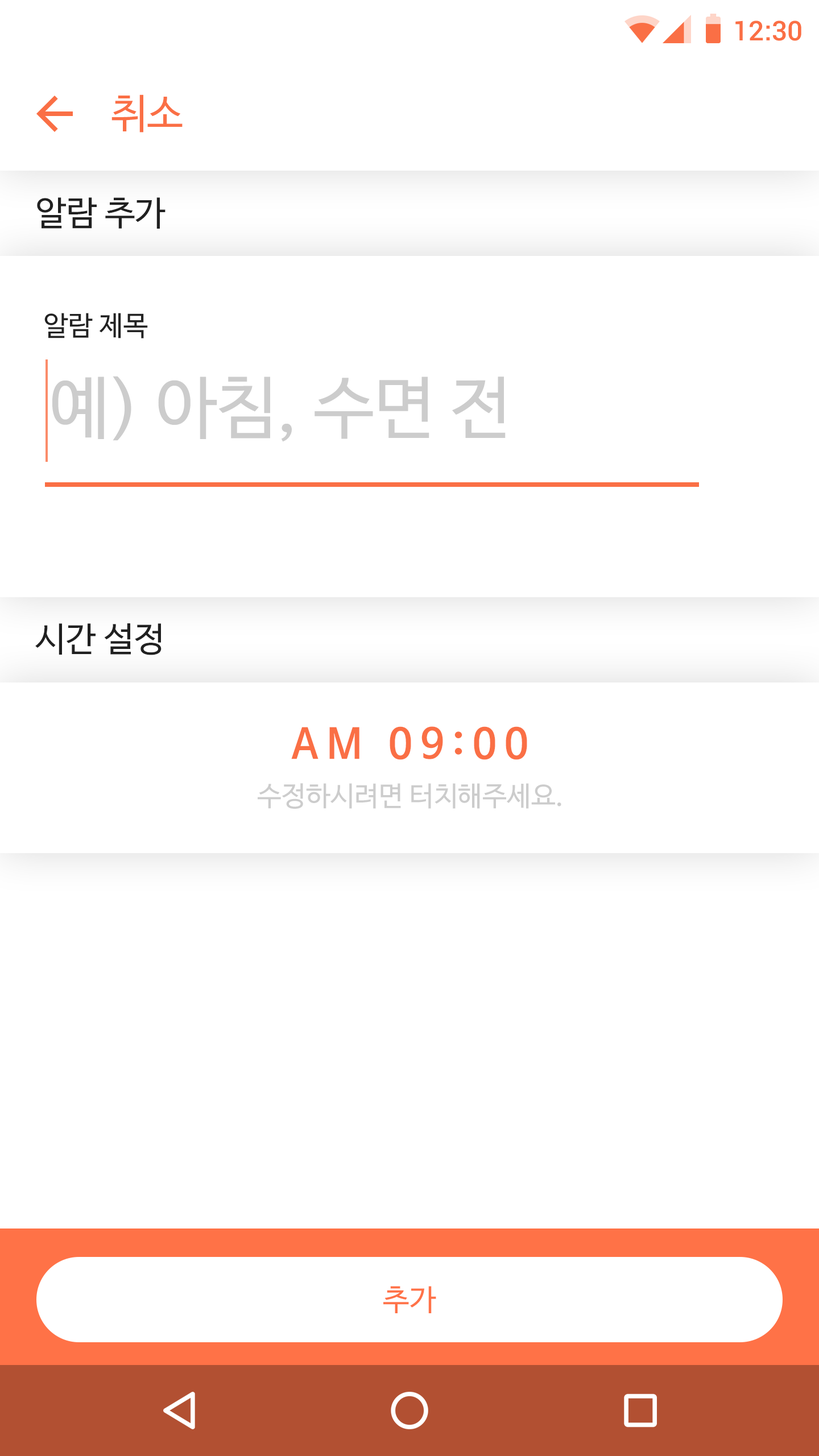
<style>
.page{position:relative;width:819px;height:1456px;background:#ffffff}
.page>*{position:absolute;margin:0}
.t1{font:27.3px "Roboto-Medium";color:#fa6f45}
.t2{font:40.9px "NanumBarunGothic";color:#fa6f45}
.t3{font:34.1px "NanumBarunGothic";color:#202020}
.t4{font:27.3px "NanumBarunGothic";color:#222222}
.t5{font:68.2px "NanumBarunGothic";color:#cccccc}
.t6{font:40.9px "NanumBarunGothicBold";letter-spacing:0.2em;color:#fa6f45}
.t7{font:27.3px "NanumBarunGothic";color:#cccccc}
.t8{font:29.6px "NanumBarunGothic";color:#ff7247}
</style>
<div class="page">
<p class="t1" style="left:735px;top:20px;width:66px;height:21px">12:30</p>
<p class="t2" style="left:111px;top:94px;width:72px;height:39px">취소</p>
<p class="t3" style="left:37px;top:197px;width:129px;height:32px">알람 추가</p>
<p class="t4" style="left:44px;top:313px;width:104px;height:25px">알람 제목</p>
<p class="t5" style="left:52px;top:376px;width:454px;height:66px">예) 아침, 수면 전</p>
<p class="t3" style="left:35px;top:623px;width:127px;height:32px">시간 설정</p>
<p class="t6" style="left:291px;top:726px;width:236px;height:34px">AM 09:00</p>
<p class="t7" style="left:258px;top:783px;width:303px;height:26px">수정하시려면 터치해주세요.</p>
<p class="t8" style="left:383px;top:1286px;width:53px;height:27px">추가</p>
</div>
